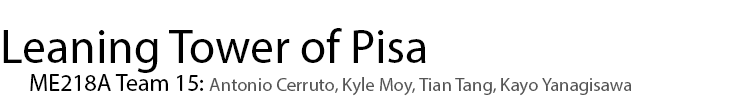
<style>
.page{position:relative;width:750px;height:100px;background:#ffffff}
.page>*{position:absolute;margin:0}
.t1{font:48px "MyriadPro-Regular";color:#000000}
.t2{font:18.7px "MyriadPro-Regular";color:#555555}
.t3{font:24px "MyriadPro-Regular";color:#000000}
</style>
<div class="page">
<p class="t1" style="left:3px;top:28px;width:423px;height:45px">Leaning Tower of Pisa</p>
<p class="t2" style="left:30px;top:74px;width:601px;height:22px"><span class="t3">ME218A Team 15: </span>Antonio Cerruto, Kyle Moy, Tian Tang, Kayo Yanagisawa</p>
</div>
